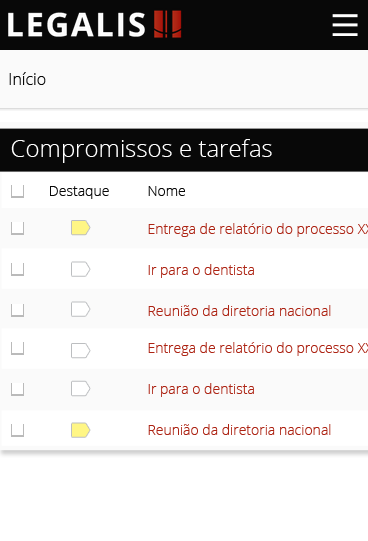
<style>
.page{position:relative;width:368px;height:541px;background:#ffffff}
.page>*{position:absolute;margin:0}
.t1{font:16px "OpenSans-Light";color:#080808}
.t2{font:24px "OpenSans-Light";color:#ffffff}
.t3{font:14px "OpenSans-Light";color:#080808}
.t4{font:14px "OpenSans-Light";color:#ad2414}
</style>
<div class="page">
<p class="t1" style="left:9px;top:72px;width:37px;height:13px">Início</p>
<p class="t2" style="left:11px;top:139px;width:261px;height:24px">Compromissos e tarefas</p>
<p class="t3" style="left:50px;top:186px;width:59px;height:13px">Destaque</p>
<p class="t3" style="left:148px;top:186px;width:37px;height:10px">Nome</p>
<p class="t4" style="left:148px;top:264px;width:106px;height:14px">Ir para o dentista</p>
<p class="t4" style="left:148px;top:305px;width:183px;height:11px">Reunião da diretoria nacional</p>
<p class="t4" style="left:148px;top:383px;width:106px;height:14px">Ir para o dentista</p>
<p class="t4" style="left:148px;top:424px;width:183px;height:11px">Reunião da diretoria nacional</p>
</div>
